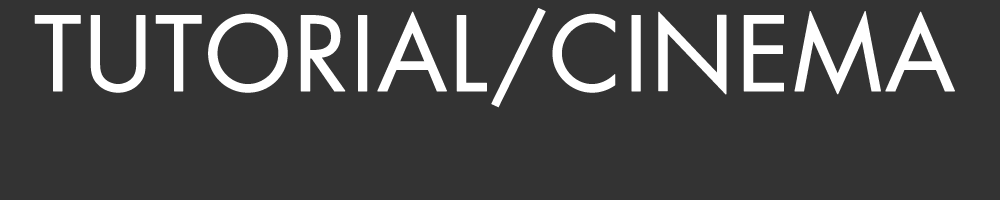
<style>
.page{position:relative;width:1000px;height:200px;background:#333333}
.page>*{position:absolute;margin:0}
.t1{font:100px "FuturaLT-Book";color:#ffffff;font-weight:bold}
</style>
<div class="page">
<p class="t1" style="left:34px;top:8px;width:921px;height:100px">TUTORIAL/CINEMA</p>
</div>
